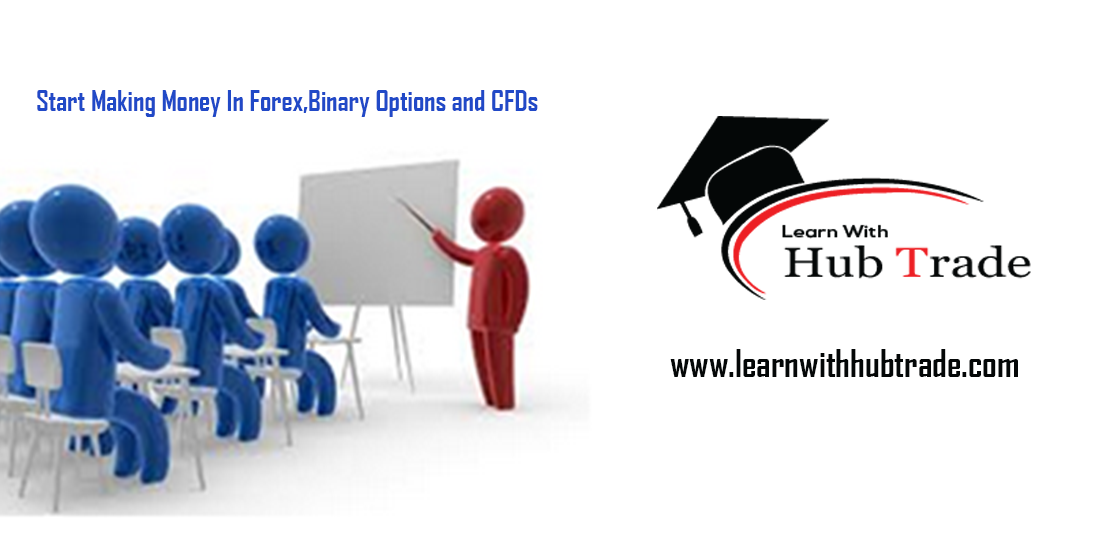
<style>
.page{position:relative;width:1120px;height:560px;background:#ffffff}
.page>*{position:absolute;margin:0}
.t1{font:27.7px "AgencyFB-Bold";color:#2149c7}
.t2{font:36px "AgencyFB-Bold";color:#040707}
</style>
<div class="page">
<p class="t1" style="left:37px;top:90px;width:501px;height:27px">Start Making Money In Forex,Binary Options and CFDs</p>
<p class="t2" style="left:670px;top:349px;width:348px;height:28px">www.learnwithhubtrade.com</p>
</div>
